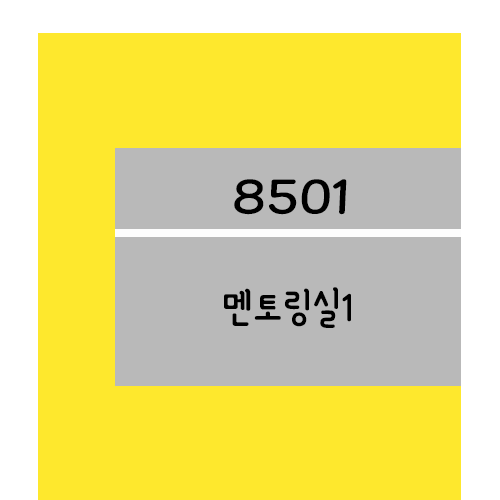
<style>
.page{position:relative;width:500px;height:500px;background:#fee82d}
.page>*{position:absolute;margin:0}
.t1{font:61.2px "YanoljaYacheR";color:#000000;scale:1.18 1}
.t2{font:48px "YanoljaYacheR";color:#000000}
</style>
<div class="page">
<p class="t1" style="left:234px;top:179px;width:113px;height:36px">8501</p>
<p class="t2" style="left:224px;top:287px;width:127px;height:41px">멘토링실1</p>
</div>
